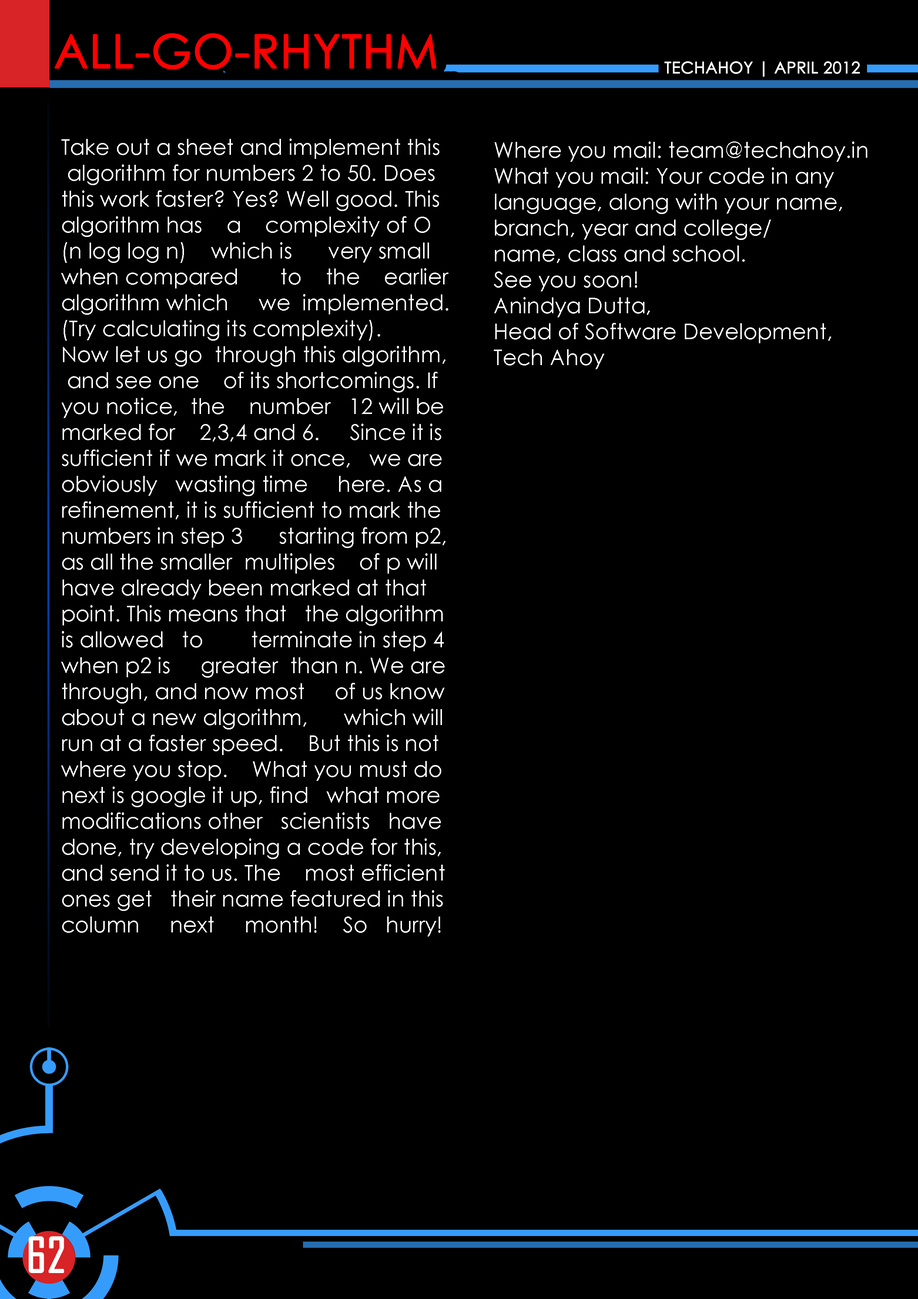
<style>
.page{position:relative;width:918px;height:1299px;background:#000000}
.page>*{position:absolute;margin:0}
.t1{font:46.3px "CenturyGothic";color:#ff0000;text-transform:uppercase;font-weight:bold}
.t2{font:16px "CenturyGothic";color:#ffffff;text-transform:uppercase;font-weight:bold}
.t3{font:21.6px "CenturyGothic";color:#ffffff}
.t4{font:46.3px "AgencyFB-Reg";color:#ffffff;text-transform:uppercase;font-weight:bold}
</style>
<div class="page">
<p class="t1" style="left:54px;top:33px;width:382px;height:37px">All-Go-Rhythm</p>
<p class="t2" style="left:665px;top:61px;width:195px;height:16px">techahoy | APRIL 2012</p>
<p class="t3" style="left:61px;top:138px;width:388px;height:798px;text-align:justify">Take out a sheet and implement this<br> algorithm for numbers 2 to 50. Does <br>this work faster? Yes? Well good. This<br>algorithm has    a    complexity of O<br>(n log log n)    which is      very small <br>when compared       to    the    earlier <br>algorithm which     we  implemented. <br>(Try calculating its complexity).<br>Now let us go  through this algorithm,<br> and see one    of its shortcomings. If <br>you notice,  the    number   12 will be <br>marked for    2,3,4 and 6.     Since it is <br>sufficient if we mark it once,   we are<br>obviously   wasting time     here. As a <br>refinement, it is sufficient to mark the <br>numbers in step 3      starting from p2, <br>as all the smaller  multiples    of p will <br>have already been marked at that <br>point. This means that   the algorithm <br>is allowed   to        terminate in step 4 <br>when p2 is     greater  than n. We are <br>through, and now most     of us know <br>about a new algorithm,      which will <br>run at a faster speed.    But this is not <br>where you stop.    What you must do <br>next is google it up, find   what more<br>modifications other   scientists   have <br>done, try developing a code for this,<br>and send it to us. The    most efficient <br>ones get   their name featured in this <br>column     next     month!    So   hurry!</p>
<p class="t3" style="left:494px;top:141px;width:373px;height:228px;text-align:justify">Where you mail: team@techahoy.in<br>What you mail: Your code in any <br>language, along with your name, <br>branch, year and college/<br>name, class and school.<br>See you soon!<br>Anindya Dutta,<br>Head of Software Development,<br>Tech Ahoy</p>
<p class="t4" style="left:29px;top:1236px;width:35px;height:37px">62</p>
</div>
